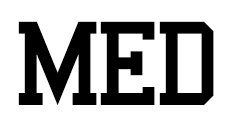
<style>
.page{position:relative;width:230px;height:128px;background:#ffffff}
.page>*{position:absolute;margin:0}
.t1{font:121.9px "College";letter-spacing:-0.06em;color:#000000}
</style>
<div class="page">
<p class="t1" style="left:18px;top:21px;width:196px;height:84px">MED</p>
</div>
